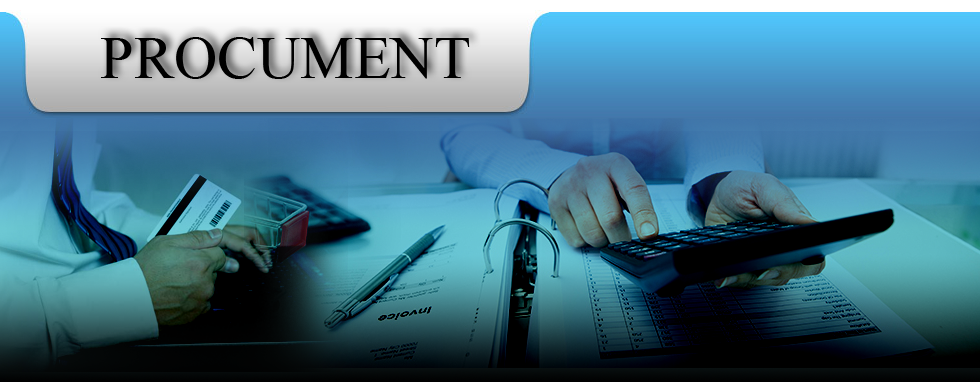
<style>
.page{position:relative;width:980px;height:383px}
.page>*{position:absolute;margin:0}
.t1{font:60px "TimesNewRomanPSMT";color:#000000}
</style>
<div class="page">
<p class="t1" style="left:101px;top:37px;width:369px;height:42px">PROCUMENT</p>
</div>
